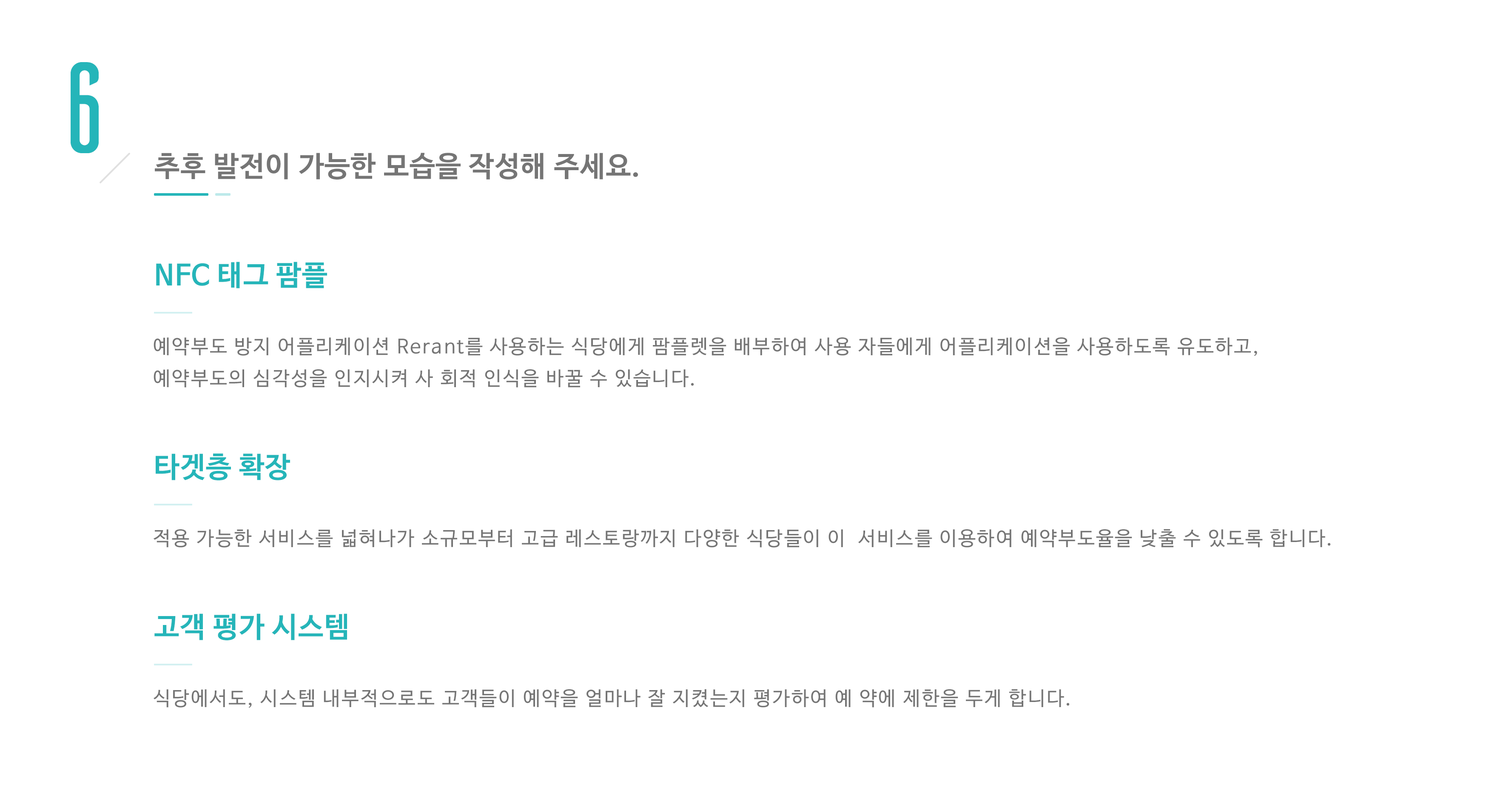
<style>
.page{position:relative;width:1492px;height:799px;background:#ffffff}
.page>*{position:absolute;margin:0}
.t1{font:127.6px "Ailerons-Regular";letter-spacing:0.025em;color:#25b5b9}
.t2{font:28.4px "NanumBarunGothicBold";letter-spacing:0.025em;color:#757575}
.t3{font:28.4px "NanumBarunGothicBold";letter-spacing:0.025em;color:#25b5b9}
.t4{font:19.5px/31.9px "NanumBarunGothic";letter-spacing:0.075em;color:#757575}
.t5{font:19.5px "NanumBarunGothic";letter-spacing:0.075em;color:#757575}
</style>
<div class="page">
<p class="t1" style="left:71px;top:62px;width:28px;height:91px">6</p>
<p class="t2" style="left:155px;top:153px;width:483px;height:27px">추후 발전이 가능한 모습을 작성해 주세요.</p>
<p class="t3" style="left:156px;top:262px;width:171px;height:26px">NFC 태그 팜플</p>
<p class="t4" style="left:154px;top:337px;width:1104px;height:51px">예약부도 방지 어플리케이션 Rerant를 사용하는 식당에게 팜플렛을 배부하여 사용 자들에게 어플리케이션을 사용하도록 유도하고, <br>예약부도의 심각성을 인지시켜 사 회적 인식을 바꿀 수 있습니다.</p>
<p class="t3" style="left:156px;top:454px;width:134px;height:26px">타겟층 확장</p>
<p class="t5" style="left:154px;top:529px;width:1177px;height:19px">적용 가능한 서비스를 넓혀나가 소규모부터 고급 레스토랑까지 다양한 식당들이 이  서비스를 이용하여 예약부도율을 낮출 수 있도록 합니다.</p>
<p class="t3" style="left:154px;top:613px;width:193px;height:27px">고객 평가 시스템</p>
<p class="t5" style="left:154px;top:689px;width:916px;height:19px">식당에서도, 시스템 내부적으로도 고객들이 예약을 얼마나 잘 지켰는지 평가하여 예 약에 제한을 두게 합니다.</p>
</div>
